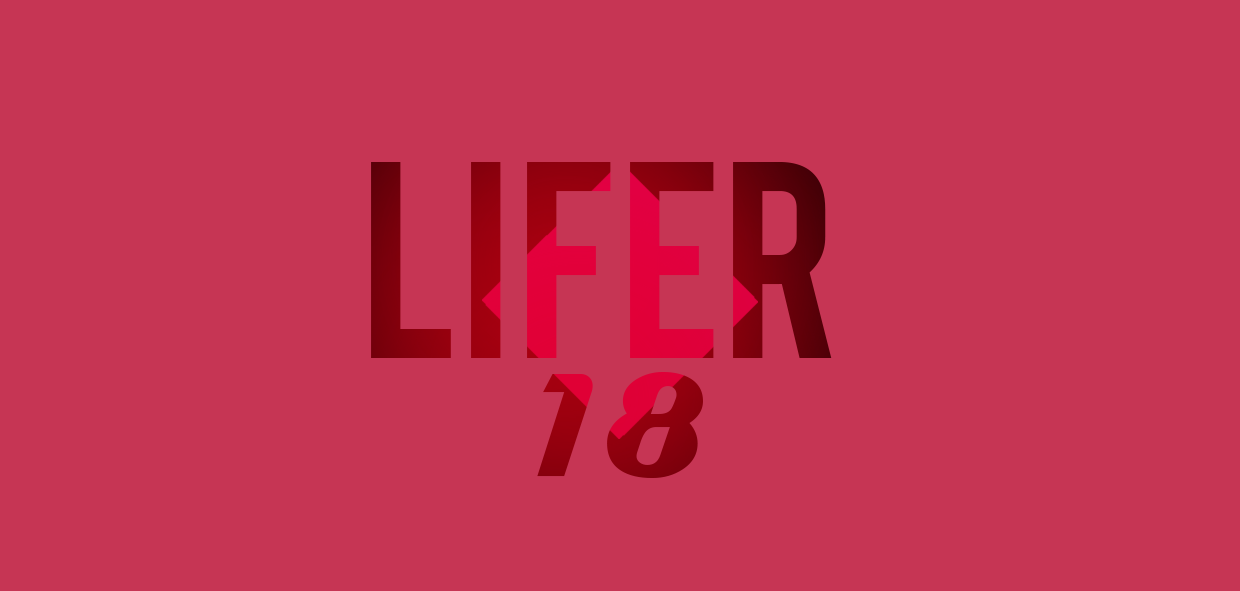
<style>
.page{position:relative;width:1240px;height:591px;background:#c63554}
.page>*{position:absolute;margin:0}
.t1{font:218.5px "Bebas"}
.t2{font:149.4px "Magneto-Bold";color:#92000e}
</style>
<div class="page">
<p class="t1" style="left:371px;top:162px;width:461px;height:196px">lifer</p>
<p class="t2" style="left:537px;top:372px;width:166px;height:106px">18</p>
</div>
